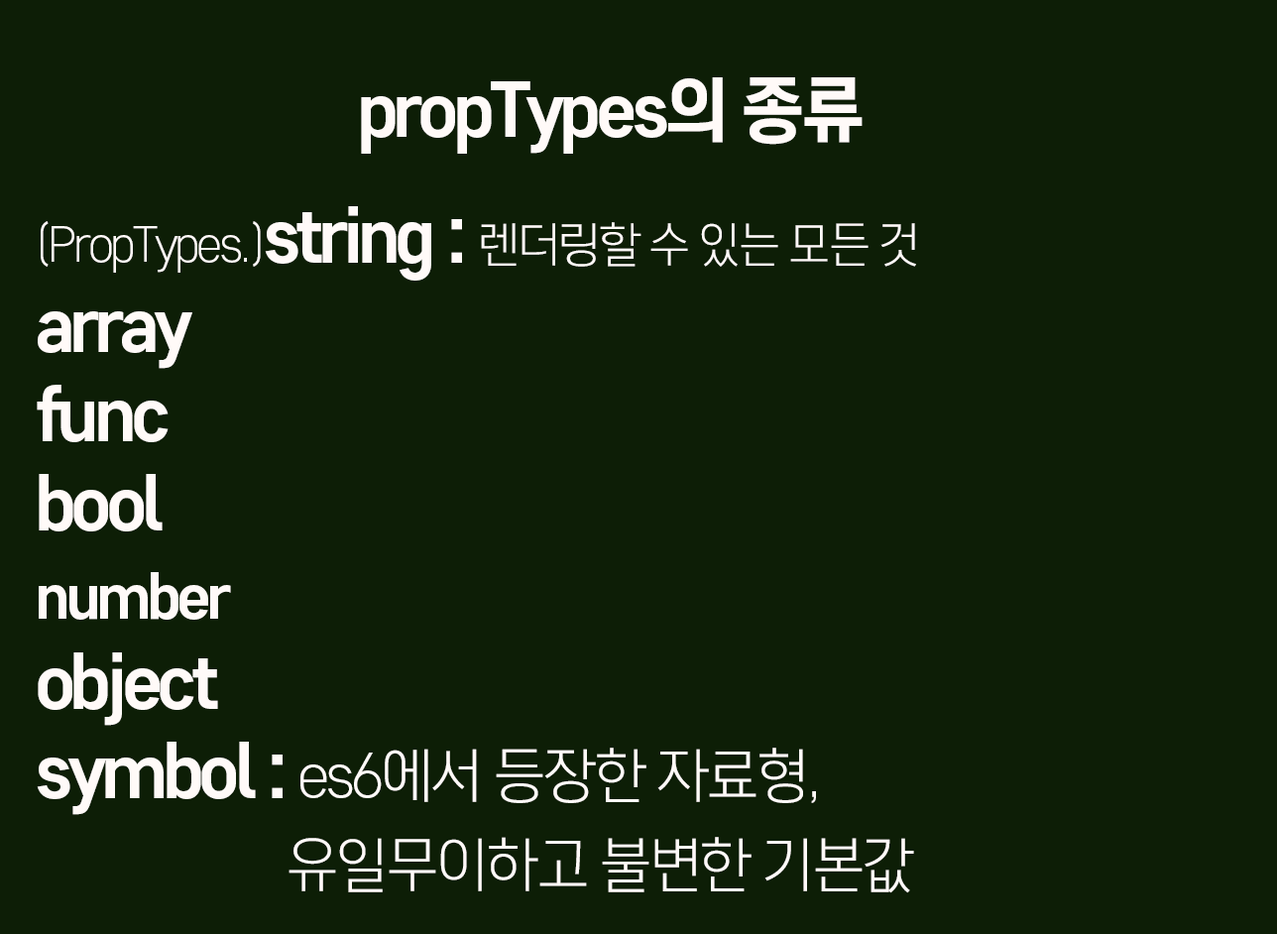
<style>
.page{position:relative;width:1277px;height:934px;background:#0d1e06}
.page>*{position:absolute;margin:0}
.t1{font:71.4px "CoreGothicD-7ExtraBold";letter-spacing:-0.075em;color:#fffaf8}
.t2{font:59.5px/89.2px "CoreGothicD-3Light";letter-spacing:-0.075em;color:#fffaf8}
.t3{font:47.6px/89.2px "CoreGothicD-3Light";letter-spacing:-0.075em;color:#fffaf8}
.t4{font:71.4px/89.2px "CoreGothicD-7ExtraBold";letter-spacing:-0.075em;color:#fffaf8}
.t5{font:59.5px/89.2px "CoreGothicD-7ExtraBold";letter-spacing:-0.075em;color:#fffaf8}
</style>
<div class="page">
<p class="t1" style="left:361px;top:77px;width:501px;height:77px">propTypes의 종류</p>
<p class="t2" style="left:37px;top:206px;width:879px;height:687px"><span class="t3">(PropTypes.)</span><span class="t4">string : </span><span class="t3">렌더링할 수 있는 모든 것<br></span><span class="t4">array<br>func<br>bool<br></span><span class="t5">number<br></span><span class="t4">object<br>symbol : </span>es6에서 등장한 자료형, <br>       유일무이하고 불변한 기본값</p>
</div>
